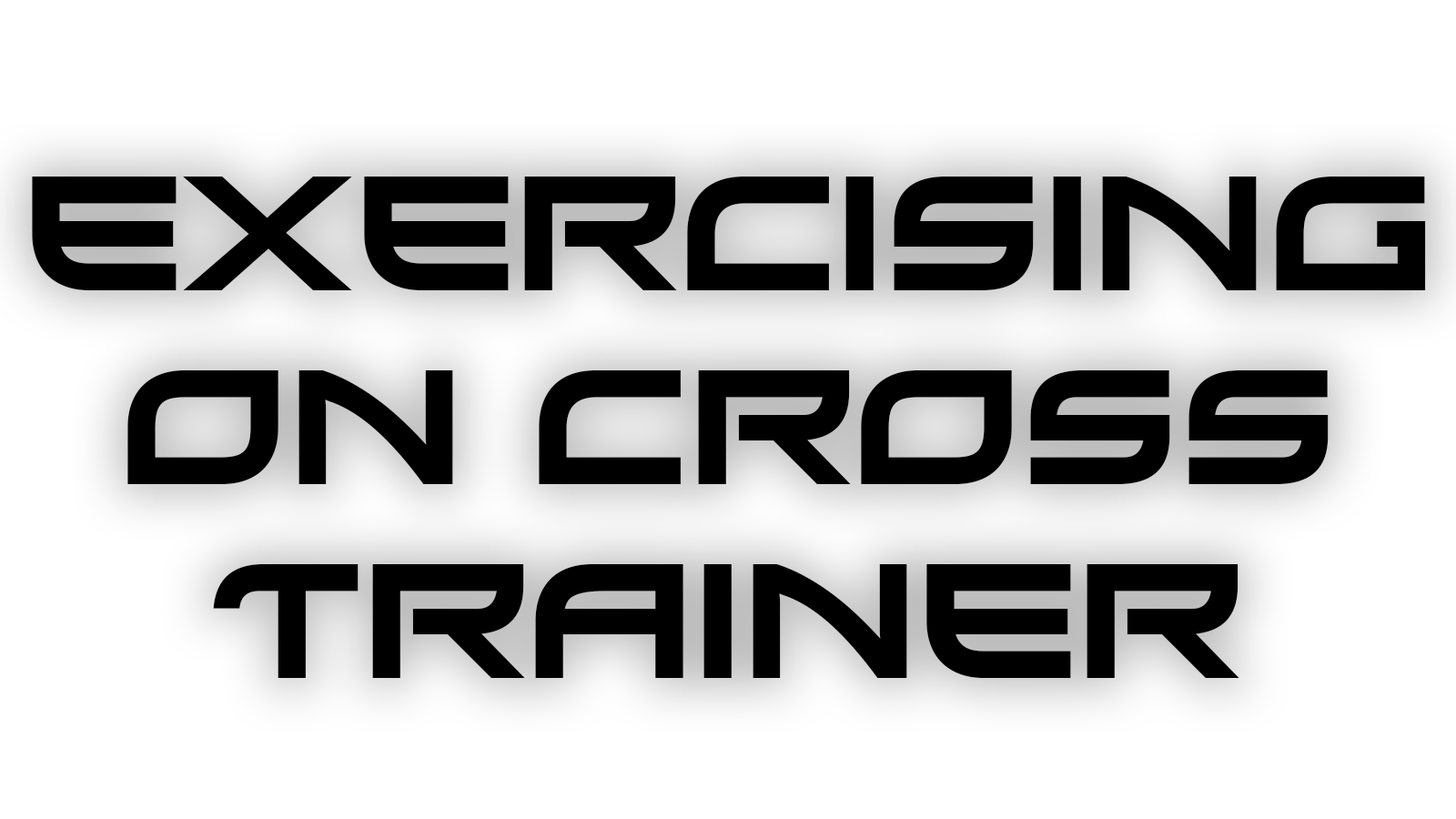
<style>
.page{position:relative;width:1456px;height:819px;background:#ffffff}
.page>*{position:absolute;margin:0}
.t1{font:161.8px "Xirod-Regular";color:#000000}
</style>
<div class="page">
<p class="t1" style="left:32px;top:177px;width:1394px;height:501px;text-align:center">Exercising<br>on cross<br>trainer</p>
</div>
